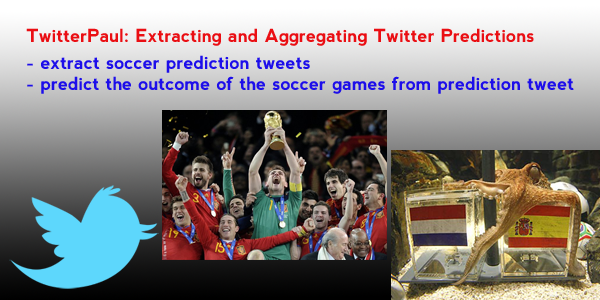
<style>
.page{position:relative;width:600px;height:300px}
.page>*{position:absolute;margin:0}
.t1{font:18px "nevis-Bold";color:#ea0e13}
.t2{font:18px "nevis-Bold";color:#1d0eea}
</style>
<div class="page">
<p class="t1" style="left:26px;top:28px;width:508px;height:18px">TwitterPaul: Extracting and Aggregating Twitter Predictions</p>
<p class="t2" style="left:27px;top:55px;width:547px;height:39px">- extract soccer prediction tweets<br>- predict the outcome of the soccer games from prediction tweet</p>
</div>
